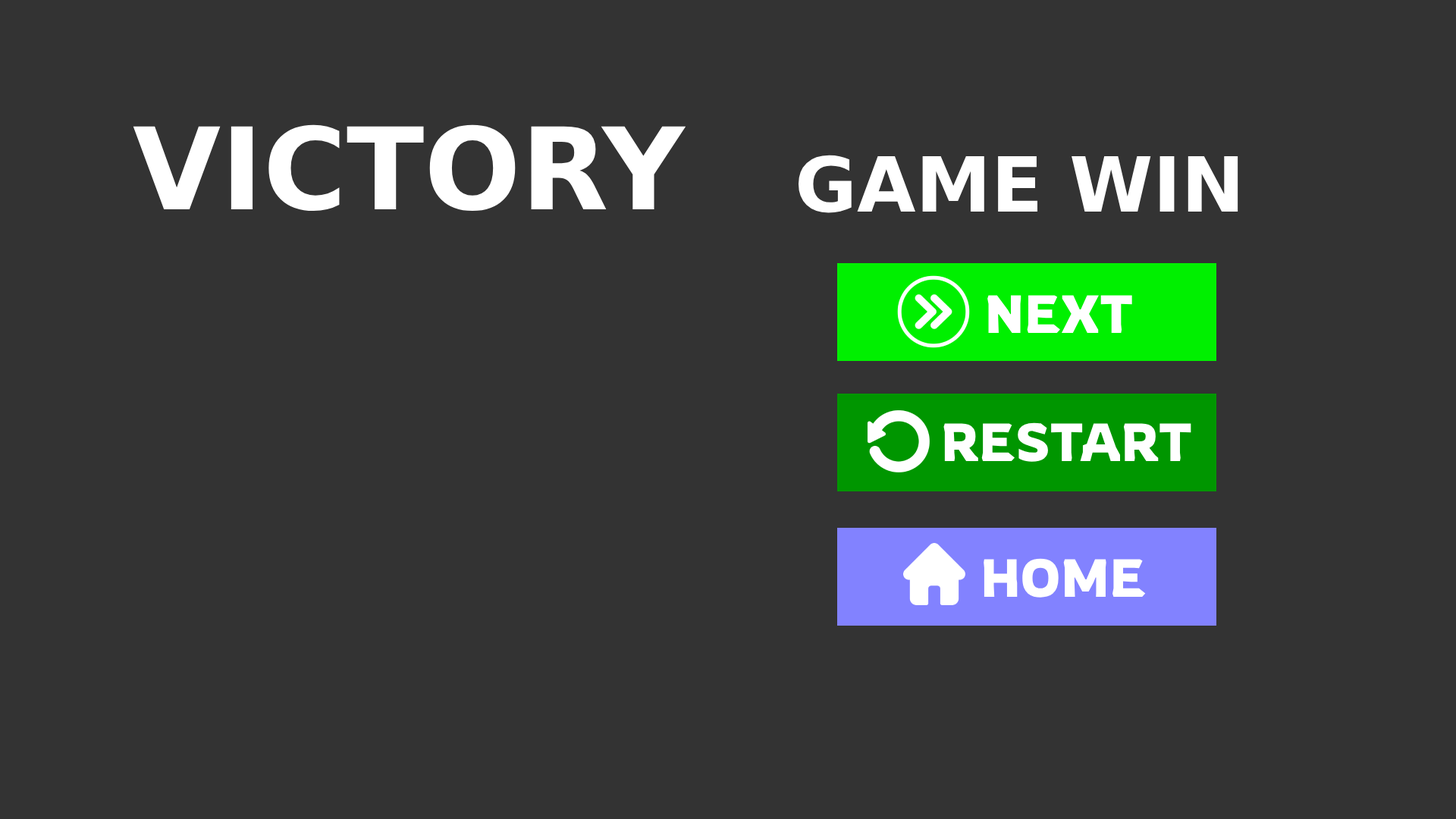
<style>
.page{position:relative;width:1456px;height:819px;background:#333333}
.page>*{position:absolute;margin:0}
.t1{font:113.7px "DejaVuSans-Bold";color:#ffffff}
.t2{font:75.8px "DejaVuSans-Bold";color:#ffffff}
.t3{font:53.1px "Rowdies-Regular";color:#ffffff}
</style>
<div class="page">
<p class="t1" style="left:133px;top:124px;width:553px;height:88px">VICTORY</p>
<p class="t2" style="left:798px;top:155px;width:440px;height:58px">GAME WIN</p>
<p class="t3" style="left:987px;top:295px;width:145px;height:38px">NEXT</p>
<p class="t3" style="left:943px;top:422px;width:248px;height:40px">RESTART</p>
<p class="t3" style="left:984px;top:558px;width:162px;height:40px">HOME</p>
</div>
